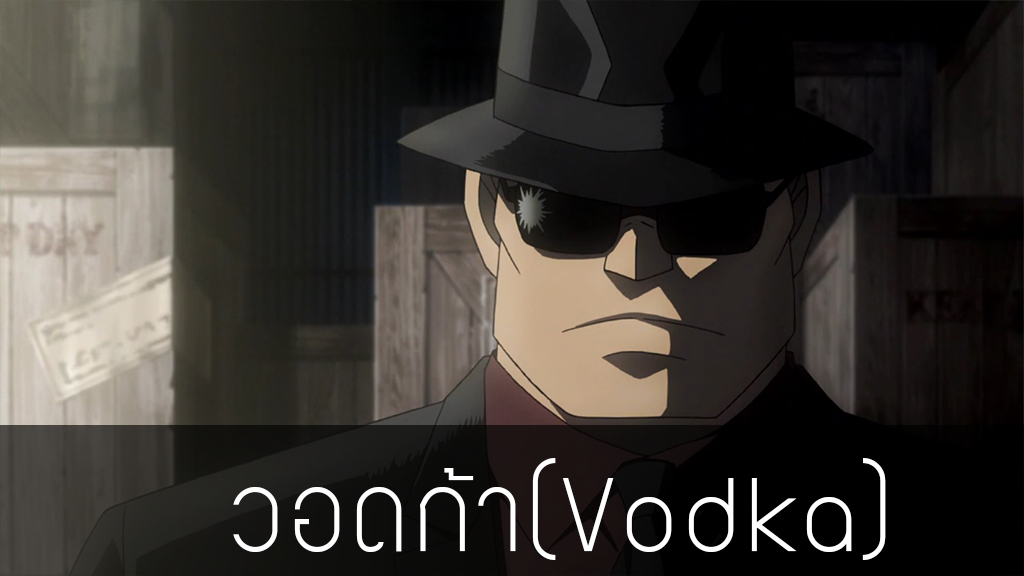
<style>
.page{position:relative;width:1024px;height:576px}
.page>*{position:absolute;margin:0}
.t1{font:100px "BangnaNew";color:#ffffff}
</style>
<div class="page">
<p class="t1" style="left:233px;top:458px;width:653px;height:102px">วอดก้า(Vodka)</p>
</div>
